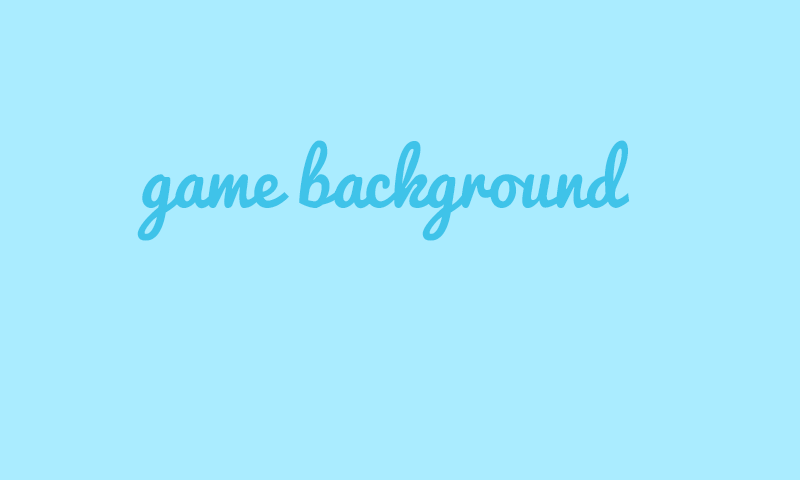
<style>
.page{position:relative;width:800px;height:480px;background:#aaecff}
.page>*{position:absolute;margin:0}
.t1{font:72px "Pacifico-Regular";color:#3fc3e9}
</style>
<div class="page">
<p class="t1" style="left:137px;top:140px;width:493px;height:101px">game background</p>
</div>
